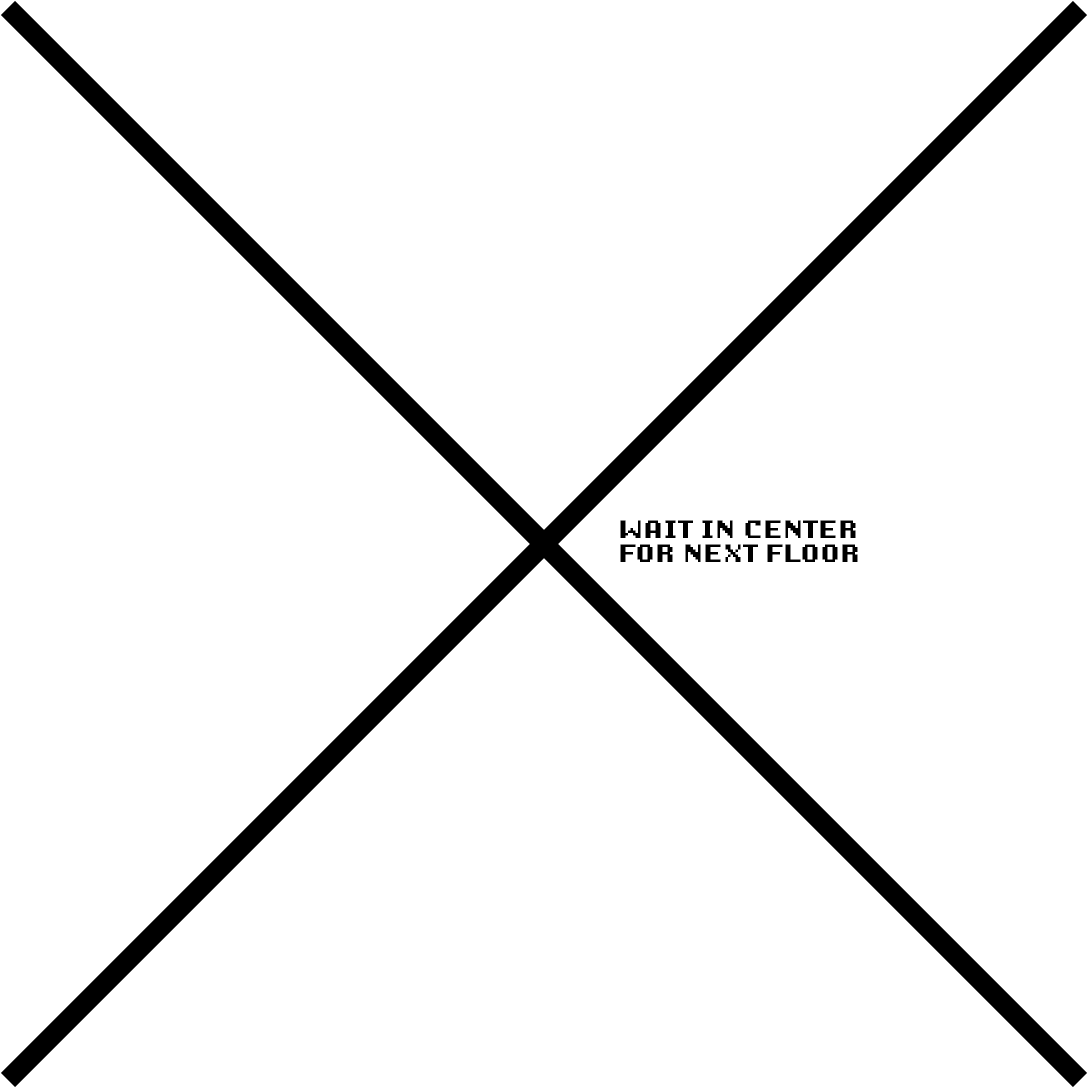
<style>
.page{position:relative;width:1088px;height:1088px;background:#ffffff}
.page>*{position:absolute;margin:0}
.t1{font:20px "Unibody8Pro-Bold";color:#000000}
</style>
<div class="page">
<p class="t1" style="left:620px;top:520px;width:238px;height:42px">WAIT IN CENTER FOR NEXT FLOOR</p>
</div>
